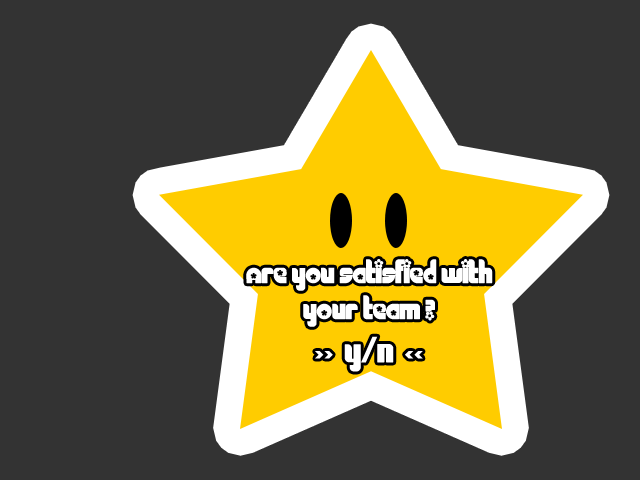
<style>
.page{position:relative;width:640px;height:480px;background:#333333}
.page>*{position:absolute;margin:0}
.t1{font:30px "Chick";color:#ffffff}
.t2{font:36px "Chick";color:#ffffff}
</style>
<div class="page">
<p class="t1" style="left:246px;top:259px;width:247px;height:113px;text-align:center">Are you satisfied with<br>your team ?<br>&gt;&gt; <span class="t2"> Y/N </span> &lt;&lt;</p>
</div>
